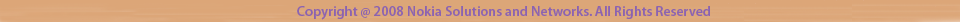
<style>
.page{position:relative;width:960px;height:22px;background:#dca678}
.page>*{position:absolute;margin:0}
.t1{font:14px "MyriadPro-Semibold";color:#8b63b1}
</style>
<div class="page">
<p class="t1" style="left:297px;top:6px;width:413px;height:14px">Copyright @ 2008 Nokia Solutions and Networks. All Rights Reserved</p>
</div>
